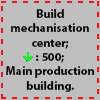
<style>
.page{position:relative;width:100px;height:100px;background:#bfbfbf}
.page>*{position:absolute;margin:0}
.t1{font:12px "MyriadPro-Bold";color:#000000}
</style>
<div class="page">
<p class="t1" style="left:6px;top:9px;width:89px;height:83px;text-align:center">Build<br>mechanisation center;<br>: 500;<br>Main production building.</p>
</div>
